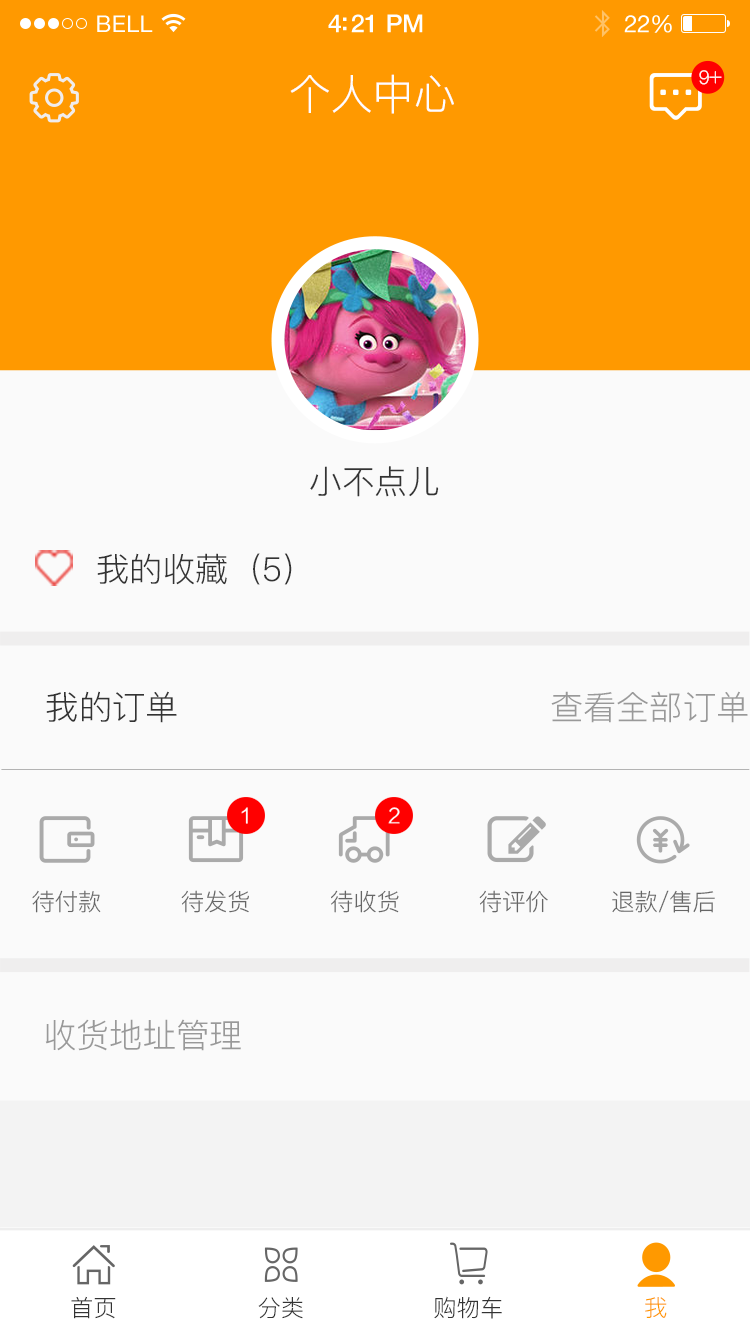
<style>
.page{position:relative;width:750px;height:1334px;background:#fafafa}
.page>*{position:absolute;margin:0}
.t1{font:23px "HelveticaNeue";letter-spacing:0.02em;color:#ffffff}
.t2{font:25px "HelveticaNeue-Medium";letter-spacing:-0.02em;color:#ffffff}
.t3{font:24px "HelveticaNeue";letter-spacing:-0.02em;color:#ffffff}
.t4{font:41.7px "PingFang-SC-Regular";letter-spacing:-0.005em;color:#fefefe;text-transform:uppercase}
.t5{font:18.7px "PingFang-SC-Regular";letter-spacing:-0.4em;color:#fefefe}
.t6{font:32.8px "PingFang-SC-Regular";color:#333333}
.t7{font:33.4px "PingFang-SC-Regular";letter-spacing:-0.005em;color:#333333;text-transform:uppercase}
.t8{font:33.4px "PingFang-SC-Regular";letter-spacing:-0.005em;color:#999999;text-transform:uppercase}
.t9{font:23.4px "PingFang-SC-Regular";letter-spacing:-0.005em;color:#666666;text-transform:uppercase}
.t10{font:23.4px "PingFang-SC-Regular";color:#333333}
.t11{font:23.4px "PingFang-SC-Regular";color:#ff9900}
</style>
<div class="page">
<p class="t1" style="left:97px;top:15px;width:56px;height:17px">BELL</p>
<p class="t2" style="left:328px;top:14px;width:95px;height:19px">4:21 PM</p>
<p class="t3" style="left:624px;top:15px;width:48px;height:18px">22%</p>
<p class="t4" style="left:290px;top:74px;width:164px;height:40px">个人中心</p>
<p class="t5" style="left:699px;top:70px;width:23px;height:15px">９＋</p>
<p class="t6" style="left:310px;top:466px;width:129px;height:31px">小不点儿</p>
<p class="t7" style="left:97px;top:553px;width:195px;height:32px">我的收藏（5）</p>
<p class="t8" style="left:46px;top:691px;width:702px;height:32px"><span class="t7">我的订单                                  </span>查看全部订单</p>
<p class="t9" style="left:32px;top:890px;width:69px;height:23px">待付款</p>
<p class="t9" style="left:181px;top:890px;width:68px;height:23px">待发货</p>
<p class="t9" style="left:331px;top:890px;width:68px;height:23px">待收货</p>
<p class="t9" style="left:479px;top:890px;width:69px;height:23px">待评价</p>
<p class="t9" style="left:612px;top:890px;width:103px;height:23px">退款/售后</p>
<p class="t8" style="left:45px;top:1019px;width:196px;height:32px">收货地址管理</p>
<p class="t10" style="left:71px;top:1296px;width:45px;height:23px">首页</p>
<p class="t10" style="left:258px;top:1297px;width:45px;height:22px">分类</p>
<p class="t10" style="left:434px;top:1296px;width:68px;height:23px">购物车</p>
<p class="t11" style="left:645px;top:1297px;width:22px;height:21px">我</p>
</div>
